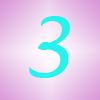
<style>
.page{position:relative;width:100px;height:100px}
.page>*{position:absolute;margin:0}
.t1{font:83.3px "LucidaHandwriting-Italic";color:#24f4ed}
</style>
<div class="page">
<p class="t1" style="left:29px;top:16px;width:41px;height:62px">3</p>
</div>
